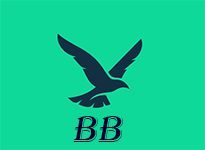
<style>
.page{position:relative;width:205px;height:150px;background:#0ed999}
.page>*{position:absolute;margin:0}
.t1{font:39.3px "Algerian";color:#000033;font-style:italic}
</style>
<div class="page">
<p class="t1" style="left:73px;top:116px;width:50px;height:26px">BB</p>
</div>
